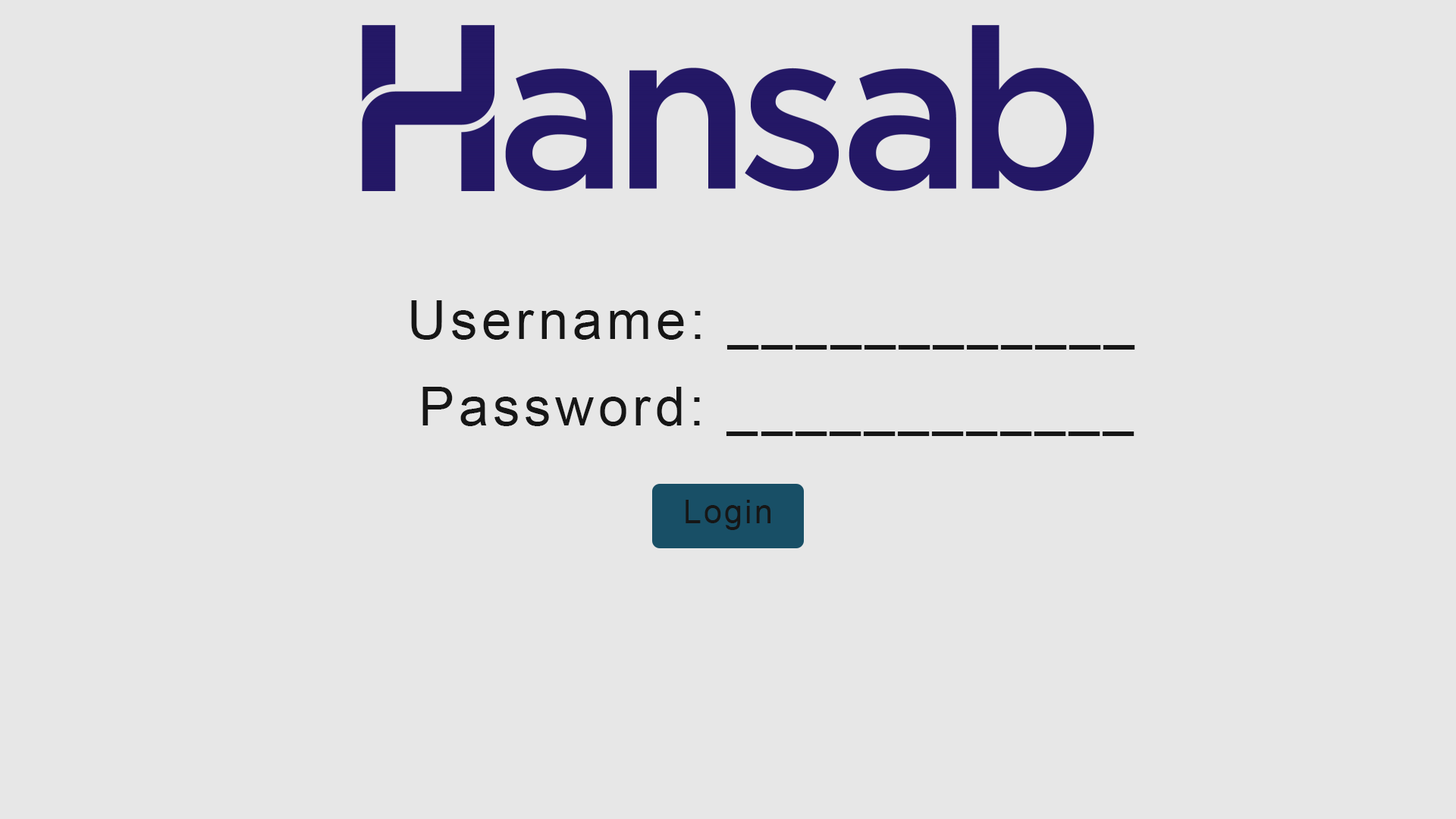
<style>
.page{position:relative;width:1456px;height:819px;background:#e7e7e7}
.page>*{position:absolute;margin:0}
.t1{font:53.7px "ArialMT";letter-spacing:0.08em;color:#161616}
.t2{font:32.2px "ArialMT";letter-spacing:0.08em;color:#161616}
</style>
<div class="page">
<p class="t1" style="left:411px;top:300px;width:724px;height:50px">Username: ____________</p>
<p class="t1" style="left:422px;top:387px;width:712px;height:49px">Password: ____________</p>
<p class="t2" style="left:686px;top:500px;width:84px;height:30px">Login</p>
</div>
